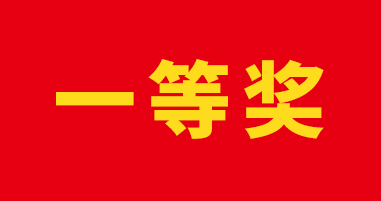
<style>
.page{position:relative;width:381px;height:201px;background:#e60012}
.page>*{position:absolute;margin:0}
.t1{font:83.1px "SourceHanSansCN-Heavy";letter-spacing:0.14em;color:#fedc1d;text-transform:uppercase}
</style>
<div class="page">
<p class="t1" style="left:56px;top:59px;width:268px;height:80px">一等奖</p>
</div>
